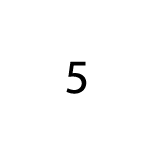
<style>
.page{position:relative;width:150px;height:150px;background:#ffffff}
.page>*{position:absolute;margin:0}
.t1{font:48px "MyriadPro-Regular";color:#000000}
</style>
<div class="page">
<p class="t1" style="left:66px;top:61px;width:21px;height:33px">5</p>
</div>
